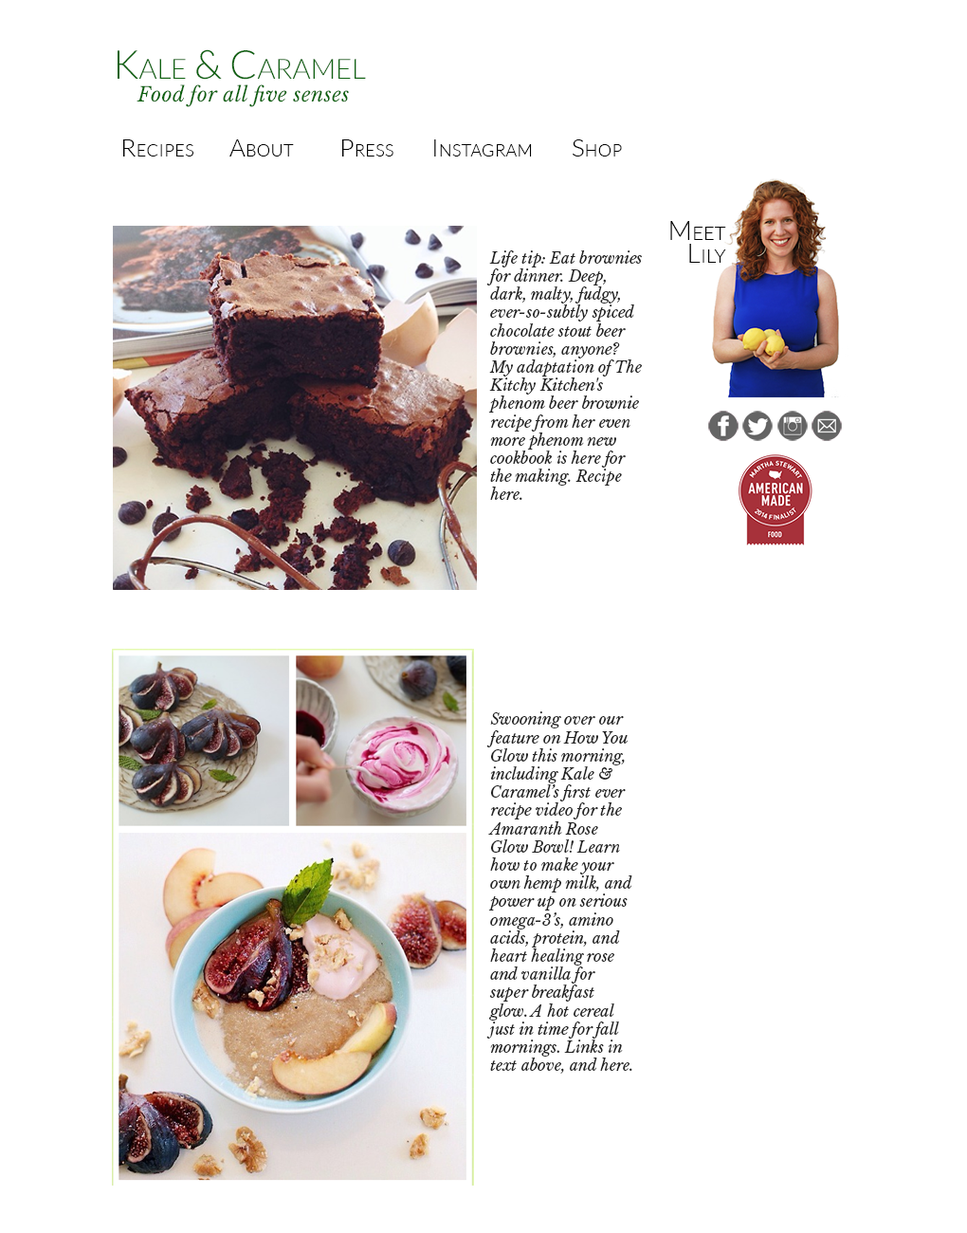
<style>
.page{position:relative;width:967px;height:1233px;background:#ffffff}
.page>*{position:absolute;margin:0}
.t1{font:39.8px "Lato-Light";letter-spacing:-0.005em;color:#0e6210;font-variant:small-caps}
.t2{font:19.9px "LibreBaskerville-Italic";letter-spacing:0.025em;color:#0e6210}
.t3{font:24.7px "Lato-Light";letter-spacing:0.01em;color:#000000;font-variant:small-caps}
.t4{font:26.6px/22.8px "Lato-Light";letter-spacing:0.01em;color:#000000;font-variant:small-caps}
.t5{font:15.2px "LibreBaskerville-Italic";color:#252525}
</style>
<div class="page">
<p class="t1" style="left:118px;top:49px;width:248px;height:31px">Kale &amp; Caramel</p>
<p class="t2" style="left:137px;top:84px;width:212px;height:23px">Food for all five senses</p>
<p class="t3" style="left:123px;top:139px;width:70px;height:17px">Recipes</p>
<p class="t3" style="left:229px;top:139px;width:65px;height:17px">About</p>
<p class="t3" style="left:342px;top:139px;width:52px;height:17px">Press</p>
<p class="t3" style="left:434px;top:139px;width:98px;height:17px">Instagram</p>
<p class="t3" style="left:573px;top:139px;width:49px;height:17px">Shop</p>
<p class="t4" style="left:670px;top:221px;width:56px;height:42px;text-align:right">Meet <br>Lily</p>
<p class="t5" style="left:486px;top:250px;width:156px;height:250px">Life tip: Eat brownies for dinner. Deep, dark, malty, fudgy, ever-so-subtly spiced chocolate stout beer brownies, anyone? My adaptation of The Kitchy Kitchen's phenom beer brownie recipe from her even more phenom new cookbook is here for the making. Recipe here.</p>
<p class="t5" style="left:486px;top:711px;width:147px;height:362px">Swooning over our feature on How You Glow this morning, including Kale &amp; Caramel’s first ever recipe video for the Amaranth Rose Glow Bowl! Learn how to make your own hemp milk, and power up on serious omega-3’s, amino acids, protein, and heart healing rose and vanilla for super breakfast glow. A hot cereal just in time for fall mornings. Links in text above, and here.</p>
</div>
